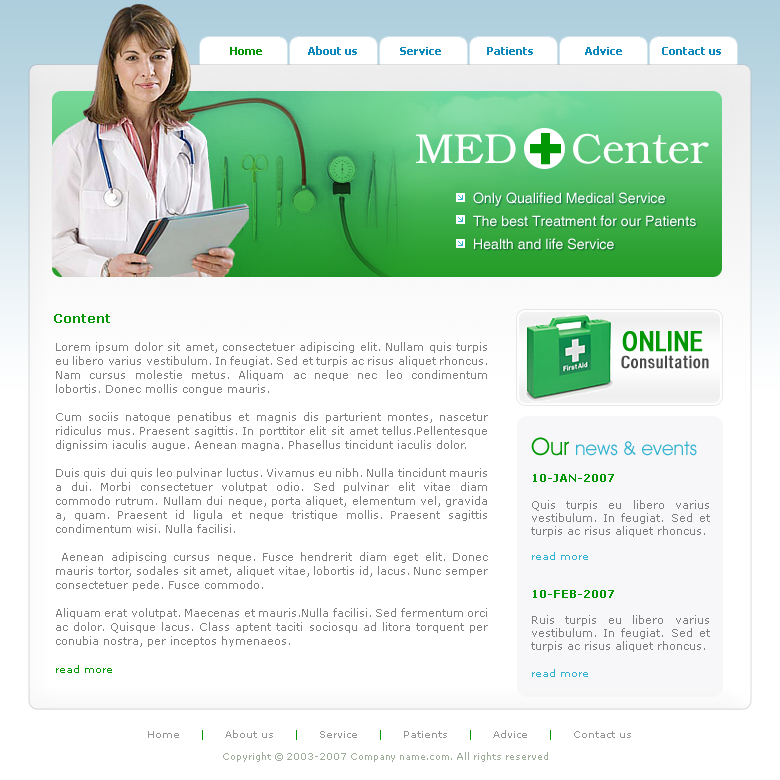
<style>
.page{position:relative;width:780px;height:780px;background:#ffffff}
.page>*{position:absolute;margin:0}
.t1{font:11px "Tahoma-Bold";color:#0c88bb}
.t2{font:11px "Tahoma-Bold";color:#009604}
.t3{font:42px "Bookman";color:#ffffff}
.t4{font:62px "Impact";color:#009604;font-weight:bold}
.t5{font:14px/23px "Helios";color:#ffffff}
.t6{font:13px "Verdana-Bold";color:#009604}
.t7{font:11px/14px "Verdana";color:#7e7e7e}
.t8{font:10px "Verdana";color:#009604}
.t9{font:28px "HeadacheNormal";color:#009604}
.t10{font:17px "HeadacheNormal";letter-spacing:0.025em;color:#484848}
.t11{font:19px "AvantGardeITCbyBT-Book";color:#33b2cf}
.t12{font:24px "AvantGardeITCbyBT-Book";color:#009604}
.t13{font:11px "Verdana";color:#7e7e7e}
.t14{font:11px "Verdana-Bold";color:#009604}
.t15{font:10px "Verdana";color:#33b2cf}
.t16{font:9px/22px "Verdana";color:#9ead9a}
.t17{font:10px/22px "Verdana";color:#949494}
.t18{font:10px/22px "Verdana";color:#009604}
</style>
<div class="page">
<p class="t1" style="left:230px;top:46px;width:491px;height:9px"><span class="t2">     Home </span>              About us              Service               Patients                 Advice             Contact us</p>
<p class="t3" style="left:416px;top:133px;width:293px;height:31px">MED    Center</p>
<p class="t4" style="left:530px;top:133px;width:31px;height:32px">+</p>
<p class="t5" style="left:473px;top:192px;width:223px;height:58px">Only Qualified Medical Service<br>The best Treatment for our Patients<br>Health and life Service</p>
<p class="t6" style="left:54px;top:314px;width:56px;height:9px">Content</p>
<p class="t7" style="left:56px;top:342px;width:432px;height:331px;text-align:justify">Lorem ipsum dolor sit amet, consectetuer adipiscing elit. Nullam quis turpis eu libero varius vestibulum. In feugiat. Sed et turpis ac risus aliquet rhoncus. Nam cursus molestie metus. Aliquam ac neque nec leo condimentum lobortis. Donec mollis congue mauris. <br><br>Cum sociis natoque penatibus et magnis dis parturient montes, nascetur ridiculus mus. Praesent sagittis. In porttitor elit sit amet tellus.Pellentesque dignissim iaculis augue. Aenean magna. Phasellus tincidunt iaculis dolor. <br><br>Duis quis dui quis leo pulvinar luctus. Vivamus eu nibh. Nulla tincidunt mauris a dui. Morbi consectetuer volutpat odio. Sed pulvinar elit vitae diam commodo rutrum. Nullam dui neque, porta aliquet, elementum vel, gravida a, quam. Praesent id ligula et neque tristique mollis. Praesent sagittis condimentum wisi. Nulla facilisi. <br><br> Aenean adipiscing cursus neque. Fusce hendrerit diam eget elit. Donec mauris tortor, sodales sit amet, aliquet vitae, lobortis id, lacus. Nunc semper consectetuer pede. Fusce commodo. <br><br>Aliquam erat volutpat. Maecenas et mauris.Nulla facilisi. Sed fermentum orci ac dolor. Quisque lacus. Class aptent taciti sociosqu ad litora torquent per conubia nostra, per inceptos hymenaeos.<br><br><span class="t8">read more</span></p>
<p class="t9" style="left:622px;top:331px;width:81px;height:21px">ONLINE</p>
<p class="t10" style="left:621px;top:355px;width:88px;height:14px">Consultation</p>
<p class="t11" style="left:531px;top:437px;width:166px;height:19px"><span class="t12">Our </span>news &amp; events</p>
<p class="t13" style="left:531px;top:474px;width:179px;height:203px;text-align:justify"><span class="t14">10-JAN-2007<br><br></span>Quis turpis eu libero varius vestibulum. In feugiat. Sed et turpis ac risus aliquet rhoncus. <br><br><span class="t15">read more<br><br><br></span><span class="t14">10-FEB-2007<br><br></span>Ruis turpis eu libero varius vestibulum. In feugiat. Sed et turpis ac risus aliquet rhoncus. <br><br><span class="t15">read more</span></p>
<p class="t16" style="left:148px;top:730px;width:483px;height:32px;text-align:center"><span class="t17">  Home    </span><span class="t18"> | </span><span class="t17">    About us     </span><span class="t18">| </span><span class="t17">    Service  </span><span class="t18">   |  </span><span class="t17">   Patients   </span><span class="t18">  |     </span><span class="t17">Advice  </span><span class="t18">   |   </span><span class="t17">  Contact us<br></span>Copyright © 2003-2007 Company name.com. All rights reserved</p>
</div>
